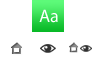
<style>
.page{position:relative;width:96px;height:64px;background:#ffffff}
.page>*{position:absolute;margin:0}
.t1{font:18px "MyriadPro-Regular";color:#ffffff}
</style>
<div class="page">
<p class="t1" style="left:39px;top:9px;width:19px;height:14px">Aa</p>
</div>
